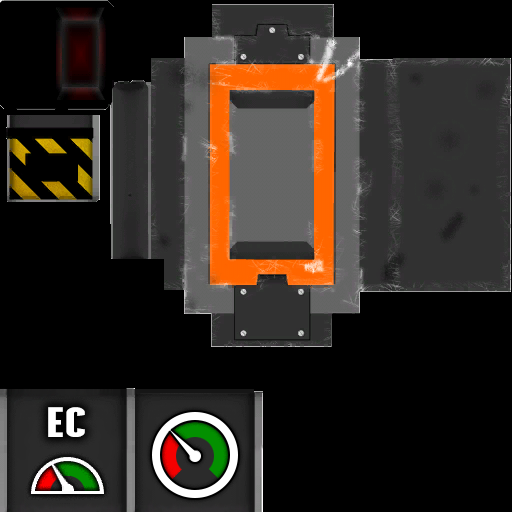
<style>
.page{position:relative;width:512px;height:512px;background:#000000}
.page>*{position:absolute;margin:0}
.t1{font:43.3px "BoldTestament";letter-spacing:-0.02em;color:#ffffff;font-weight:bold;scale:1.69 1}
</style>
<div class="page">
<p class="t1" style="left:48px;top:407px;width:37px;height:30px">EC</p>
</div>
